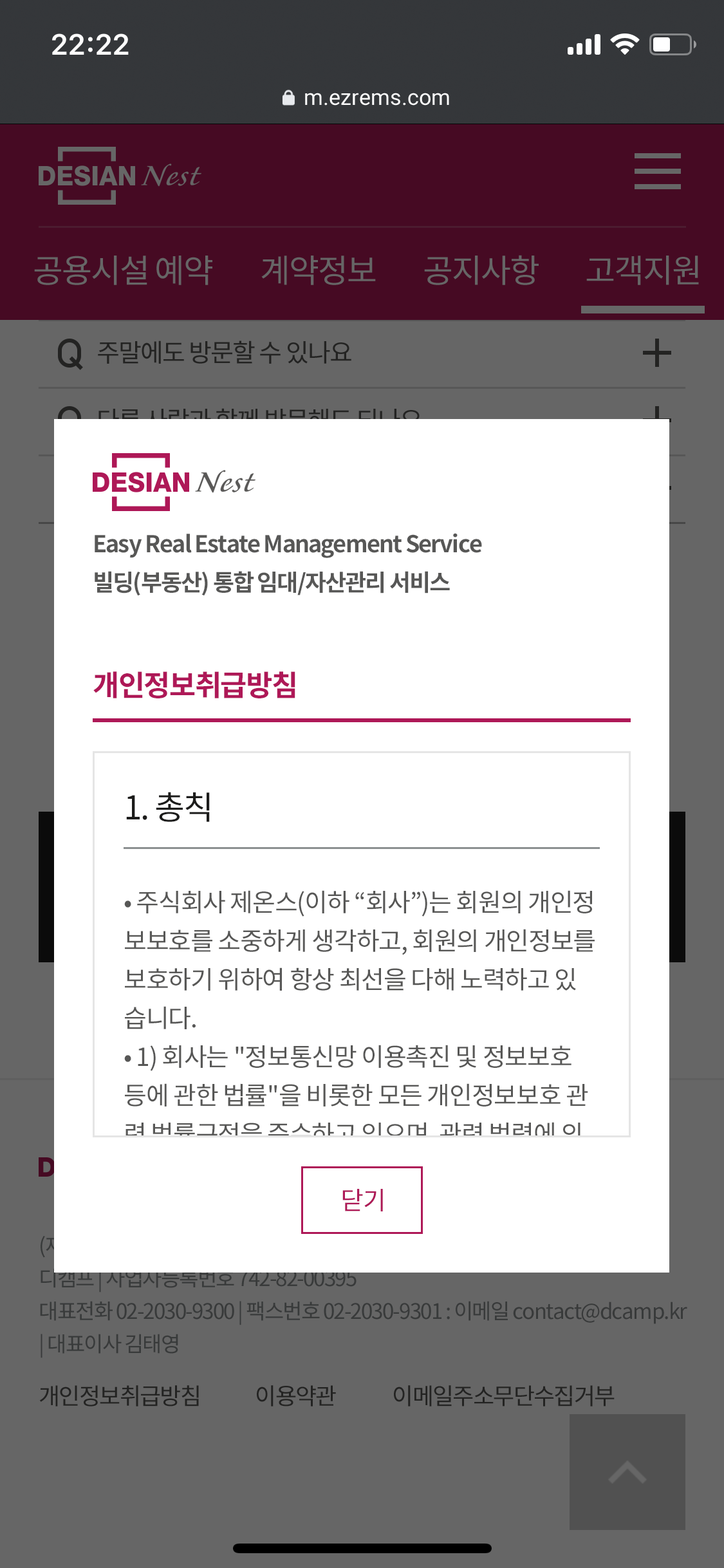
<style>
.page{position:relative;width:724px;height:1568px;background:#ffffff}
.page>*{position:absolute;margin:0}
.t1{font:23.2px/38.6px "NotoSansCJKkr-Bold";letter-spacing:-0.05em;color:#575756}
.t2{font:29px "NotoSansCJKkr-Bold";letter-spacing:-0.03em;color:#ae1857}
.t3{font:32.8px "NotoSansCJKkr-Regular";letter-spacing:-0.035em;color:#1c1c1b}
.t4{font:25.1px/38.6px "NotoSansCJKkr-Regular";letter-spacing:-0.035em;color:#575756}
.t5{font:25.1px "NotoSansCJKkr-Regular";letter-spacing:-0.035em;color:#ae1857}
</style>
<div class="page">
<p class="t1" style="left:95px;top:533px;width:387px;height:63px">Easy Real Estate Management Service<br>빌딩(부동산) 통합 임대/자산관리 서비스</p>
<p class="t2" style="left:93px;top:671px;width:202px;height:27px">개인정보취급방침</p>
<p class="t3" style="left:126px;top:792px;width:84px;height:30px">1. 총칙</p>
<p class="t4" style="left:124px;top:890px;width:475px;height:332px">• 주식회사 제온스(이하 “회사”)는 회원의 개인정<br>보보호를 소중하게 생각하고, 회원의 개인정보를 <br>보호하기 위하여 항상 최선을 다해 노력하고 있<br>습니다.<br>• 1) 회사는 "정보통신망 이용촉진 및 정보보호 <br>등에 관한 법률"을 비롯한 모든 개인정보보호 관<br>련 법률규정을 준수하고 있으며, 관련 법령에 의<br>거한 개인정보 취급방침을 정하여 이용자 권익 보<br>호에 최선을 다하고 있습니다.</p>
<p class="t5" style="left:342px;top:1189px;width:41px;height:22px">닫기</p>
</div>
